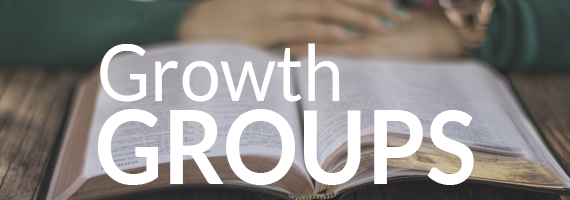
<style>
.page{position:relative;width:570px;height:200px}
.page>*{position:absolute;margin:0}
.t1{font:78px "Lato-Regular";color:#ffffff;scale:0.93 1}
.t2{font:101.6px "Lato-Bold";color:#ffffff;scale:0.93 1}
</style>
<div class="page">
<p class="t1" style="left:100px;top:43px;width:240px;height:59px">Growth</p>
<p class="t2" style="left:97px;top:109px;width:377px;height:76px">GROUPS</p>
</div>
